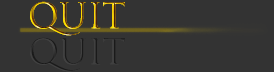
<style>
.page{position:relative;width:274px;height:72px;background:#333333}
.page>*{position:absolute;margin:0}
.t1{font:34px "TrajanColor-Concept"}
</style>
<div class="page">
<p class="t1" style="left:30px;top:1px;width:95px;height:35px">Quit</p>
</div>
